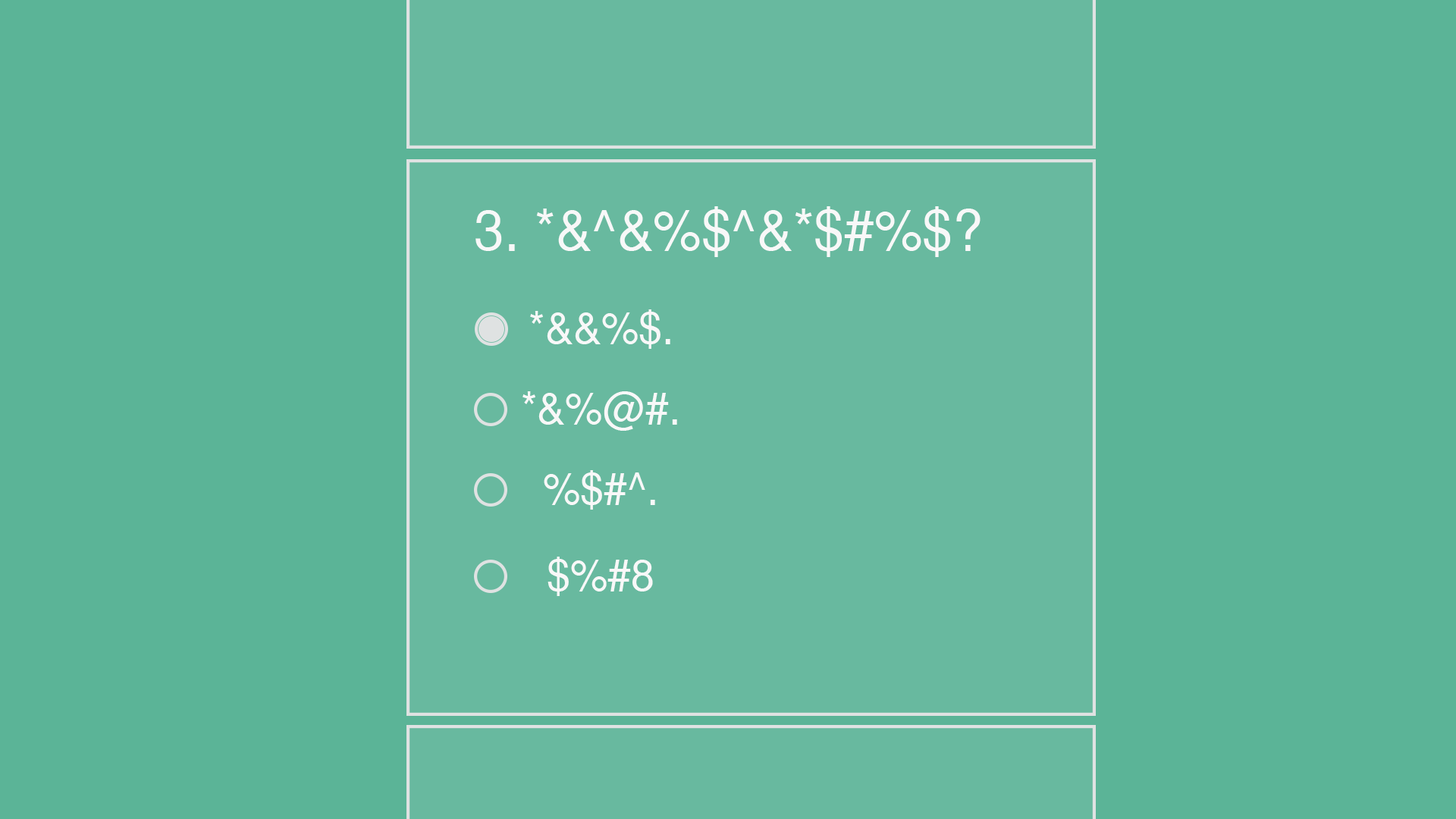
<style>
.page{position:relative;width:1456px;height:819px;background:#5bb497}
.page>*{position:absolute;margin:0}
.t1{font:56.9px "SansSerif";color:#f8f8f8;scale:0.95 1}
.t2{font:44.2px "SansSerif";color:#f8f8f8;scale:0.95 1}
</style>
<div class="page">
<p class="t1" style="left:475px;top:206px;width:506px;height:51px">3. *&amp;^&amp;%$^&amp;*$#%$?</p>
<p class="t2" style="left:530px;top:309px;width:140px;height:40px">*&amp;&amp;%$.</p>
<p class="t2" style="left:522px;top:391px;width:155px;height:40px">*&amp;%@#.</p>
<p class="t2" style="left:544px;top:470px;width:111px;height:40px">%$#^.</p>
<p class="t2" style="left:548px;top:557px;width:105px;height:39px">$%#8</p>
</div>
